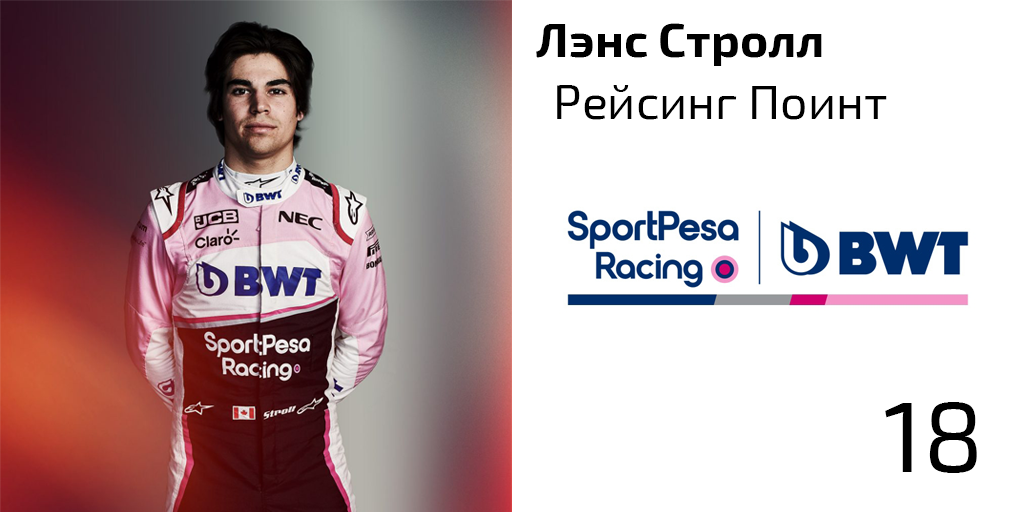
<style>
.page{position:relative;width:1024px;height:512px;background:#ffffff}
.page>*{position:absolute;margin:0}
.t1{font:48px "Exo2-Bold";color:#000000}
.t2{font:48px "Exo2-Regular";color:#000000}
.t3{font:100px "Exo2-Regular";color:#000000}
</style>
<div class="page">
<p class="t1" style="left:536px;top:23px;width:286px;height:43px">Лэнс Стролл</p>
<p class="t2" style="left:557px;top:85px;width:330px;height:35px">Рейсинг Поинт</p>
<p class="t3" style="left:885px;top:402px;width:92px;height:71px">18</p>
</div>
